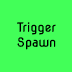
<style>
.page{position:relative;width:72px;height:72px;background:#42ff58}
.page>*{position:absolute;margin:0}
.t1{font:12.5px "NovaFlat";color:#000000}
</style>
<div class="page">
<p class="t1" style="left:17px;top:22px;width:39px;height:28px;text-align:center">Trigger<br>Spawn</p>
</div>
